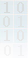
<style>
.page{position:relative;width:28px;height:58px}
.page>*{position:absolute;margin:0}
.t1{font:16px "SimSun";color:#d1d1cf;font-weight:bold}
.t2{font:16px "SimSun";color:#dadbd8;font-weight:bold}
.t3{font:16px "SimSun";color:#e7e7e7;font-weight:bold}
</style>
<div class="page">
<p class="t1" style="left:4px;top:2px;width:6px;height:11px;opacity:0.63">1</p>
<p class="t1" style="left:17px;top:2px;width:7px;height:11px;opacity:0.5">0</p>
<p class="t2" style="left:3px;top:16px;width:7px;height:11px;opacity:0.61">0</p>
<p class="t2" style="left:18px;top:16px;width:6px;height:11px;opacity:0.5">1</p>
<p class="t3" style="left:4px;top:30px;width:6px;height:11px">1</p>
<p class="t3" style="left:17px;top:30px;width:7px;height:11px">0</p>
<p class="t3" style="left:4px;top:45px;width:7px;height:11px;opacity:0.39">0</p>
<p class="t3" style="left:18px;top:45px;width:6px;height:11px;opacity:0.4">1</p>
</div>
